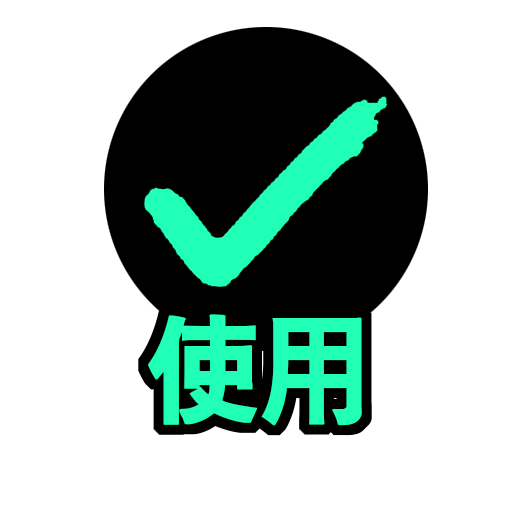
<style>
.page{position:relative;width:512px;height:512px;background:#ffffff}
.page>*{position:absolute;margin:0}
.t1{font:200px "DFHei-XB-WIN-BF";letter-spacing:-0.05em;color:#21ffb6}
</style>
<div class="page">
<p class="t1" style="left:148px;top:314px;width:214px;height:112px">使用</p>
</div>
